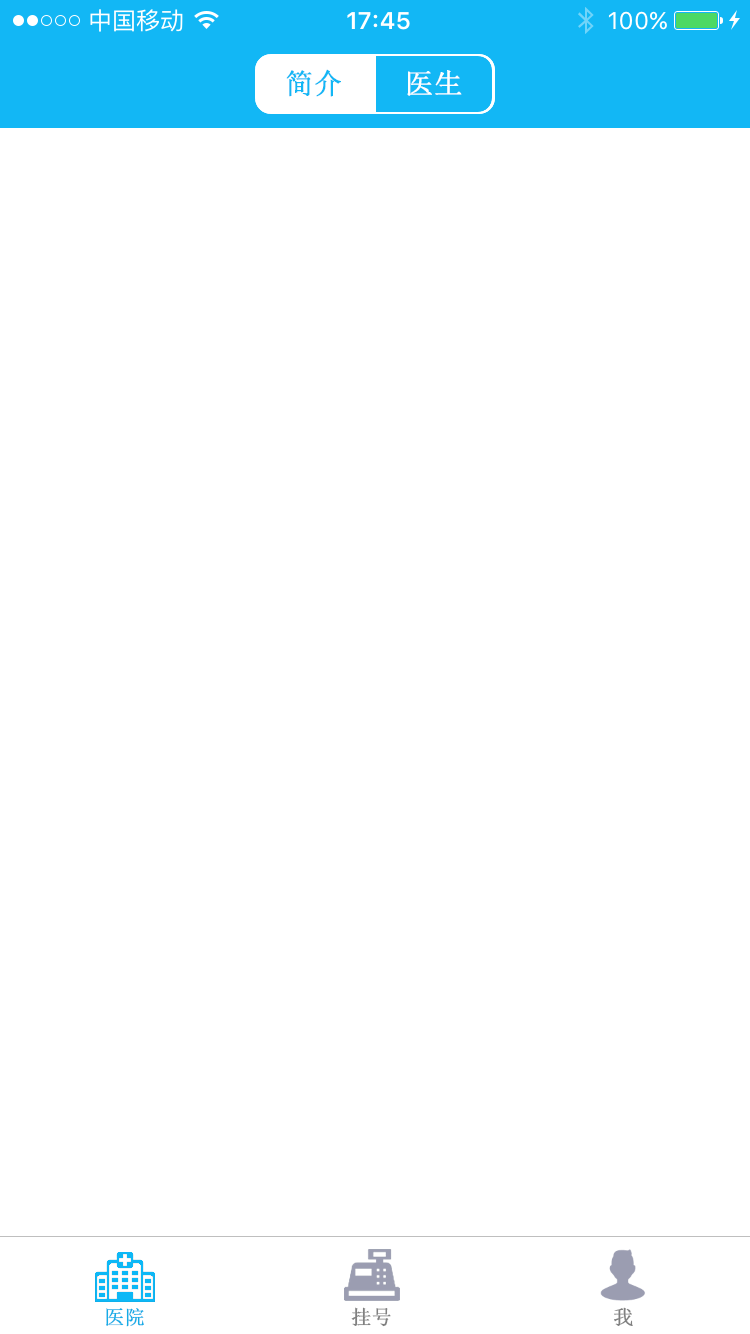
<style>
.page{position:relative;width:750px;height:1334px;background:#ffffff}
.page>*{position:absolute;margin:0}
.t1{font:28px "SimSun";color:#12b7f5;font-weight:bold}
.t2{font:28px "SimSun";color:#ffffff;font-weight:bold}
.t3{font:20px "SimSun";color:#14ade7;font-weight:bold}
.t4{font:20px "SimSun";color:#808080;font-weight:bold}
</style>
<div class="page">
<p class="t1" style="left:286px;top:69px;width:55px;height:28px">简介</p>
<p class="t2" style="left:407px;top:70px;width:55px;height:26px">医生</p>
<p class="t3" style="left:106px;top:1308px;width:38px;height:19px">医院</p>
<p class="t4" style="left:351px;top:1307px;width:40px;height:20px">挂号</p>
<p class="t4" style="left:614px;top:1307px;width:19px;height:19px">我</p>
</div>
